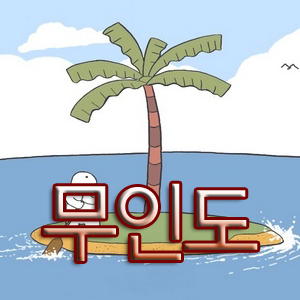
<style>
.page{position:relative;width:300px;height:300px}
.page>*{position:absolute;margin:0}
.t1{font:84.9px "NanumBarunGothic";letter-spacing:-0.06em}
</style>
<div class="page">
<p class="t1" style="left:43px;top:183px;width:215px;height:78px">무인도</p>
</div>
